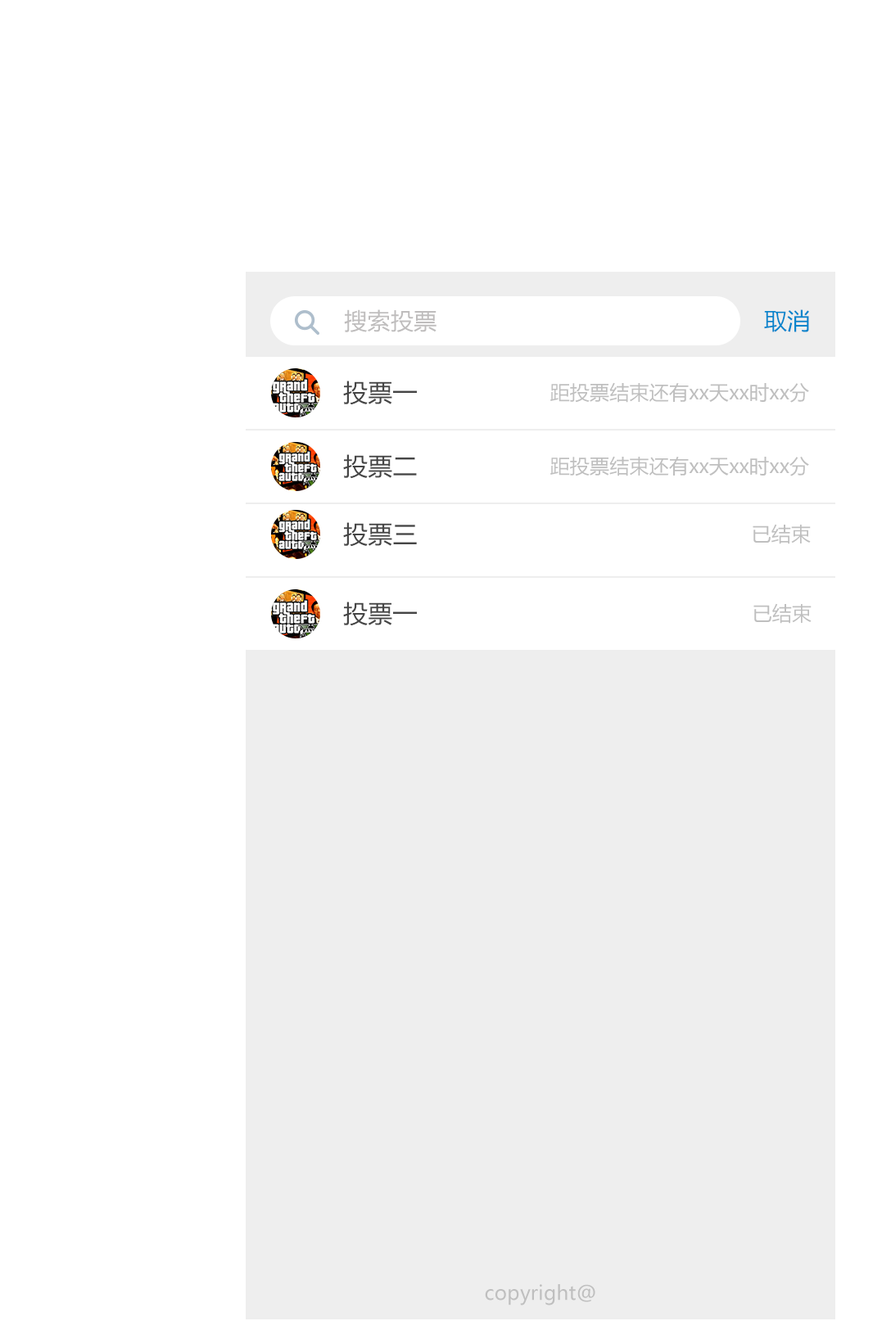
<style>
.page{position:relative;width:891px;height:1339px;background:#ffffff}
.page>*{position:absolute;margin:0}
.t1{font:22.9px "MicrosoftYaHeiUI";letter-spacing:0.01em;color:#bfbdbd}
.t2{font:22.9px "MicrosoftYaHeiUI";letter-spacing:0.01em;color:#0685cc}
.t3{font:24.6px "MicrosoftYaHeiUI";letter-spacing:0.01em;color:#454545}
.t4{font:19.6px "MicrosoftYaHeiUI";letter-spacing:0.01em;color:#bfbfbf}
</style>
<div class="page">
<p class="t1" style="left:344px;top:309px;width:92px;height:23px">搜索投票</p>
<p class="t2" style="left:764px;top:309px;width:45px;height:23px">取消</p>
<p class="t3" style="left:343px;top:381px;width:74px;height:24px">投票一</p>
<p class="t4" style="left:550px;top:382px;width:259px;height:21px">距投票结束还有xx天xx时xx分</p>
<p class="t3" style="left:343px;top:454px;width:74px;height:25px">投票二</p>
<p class="t4" style="left:550px;top:456px;width:259px;height:20px">距投票结束还有xx天xx时xx分</p>
<p class="t3" style="left:343px;top:522px;width:74px;height:25px">投票三</p>
<p class="t4" style="left:752px;top:524px;width:58px;height:20px">已结束</p>
<p class="t3" style="left:343px;top:602px;width:74px;height:24px">投票一</p>
<p class="t4" style="left:753px;top:603px;width:58px;height:21px">已结束</p>
<p class="t4" style="left:485px;top:1284px;width:110px;height:21px">copyright@</p>
</div>
